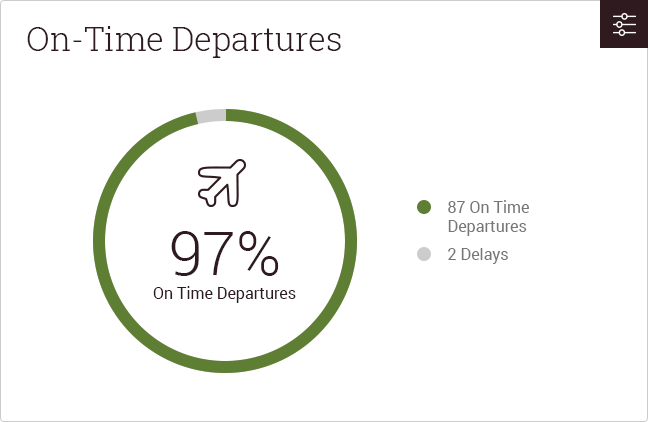
<style>
.page{position:relative;width:648px;height:422px;background:#ffffff}
.page>*{position:absolute;margin:0}
.t1{font:33px "RobotoSlab-Light";color:#2f1b1f}
.t2{font:16px "Roboto-Regular";color:#767676}
.t3{font:61px "Roboto-Light";color:#2f1b1f}
.t4{font:16px "Roboto-Regular";color:#2f1b1f}
</style>
<div class="page">
<p class="t1" style="left:27px;top:26px;width:314px;height:32px">On-Time Departures</p>
<p class="t2" style="left:448px;top:200px;width:81px;height:36px">87 On Time <br>Departures</p>
<p class="t3" style="left:171px;top:231px;width:108px;height:45px">97%</p>
<p class="t2" style="left:448px;top:248px;width:60px;height:16px">2 Delays</p>
<p class="t4" style="left:153px;top:286px;width:143px;height:17px">On Time Departures</p>
</div>
